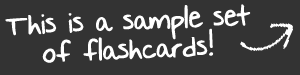
<style>
.page{position:relative;width:300px;height:75px;background:#333333}
.page>*{position:absolute;margin:0}
.t1{font:24px "NothingYouCouldSay";letter-spacing:-0.025em;color:#ffffff;font-weight:bold}
</style>
<div class="page">
<p class="t1" style="left:5px;top:4px;width:246px;height:59px;rotate:-2deg">This is a sample set<br>   of flashcards!</p>
</div>
